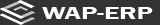
<style>
.page{position:relative;width:160px;height:25px;background:#333333}
.page>*{position:absolute;margin:0}
.t1{font:17.7px "FranklinGothic-Demi";color:#ffffff;scale:1.5 1}
</style>
<div class="page">
<p class="t1" style="left:42px;top:7px;width:111px;height:12px">WAP-ERP</p>
</div>
